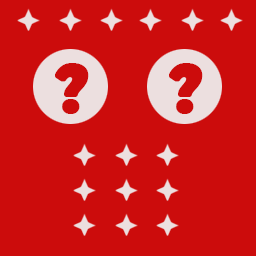
<style>
.page{position:relative;width:256px;height:256px;background:#cc0c0c}
.page>*{position:absolute;margin:0}
.t1{font:65px "BoldenVan";color:#cc0c0c;font-weight:bold}
</style>
<div class="page">
<p class="t1" style="left:55px;top:63px;width:34px;height:51px">?</p>
<p class="t1" style="left:169px;top:63px;width:34px;height:51px">?</p>
</div>
